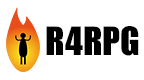
<style>
.page{position:relative;width:144px;height:80px;background:#ffffff}
.page>*{position:absolute;margin:0}
.t1{font:36px "Impact";color:#000000}
</style>
<div class="page">
<p class="t1" style="left:46px;top:26px;width:93px;height:30px">R4RPG</p>
</div>
